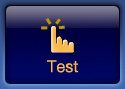
<style>
.page{position:relative;width:125px;height:89px}
.page>*{position:absolute;margin:0}
.t1{font:16px "HelveticaNeueLTPro-Lt";color:#f9b94b;font-weight:bold}
</style>
<div class="page">
<p class="t1" style="left:47px;top:60px;width:31px;height:13px">Test</p>
</div>
